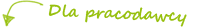
<style>
.page{position:relative;width:200px;height:27px;background:#ffffff}
.page>*{position:absolute;margin:0}
.t1{font:16.7px "SegoeScript-Bold";color:#97c00e;scale:0.97 1}
</style>
<div class="page">
<p class="t1" style="left:48px;top:4px;width:139px;height:23px;rotate:3deg">Dla pracodawcy</p>
</div>
